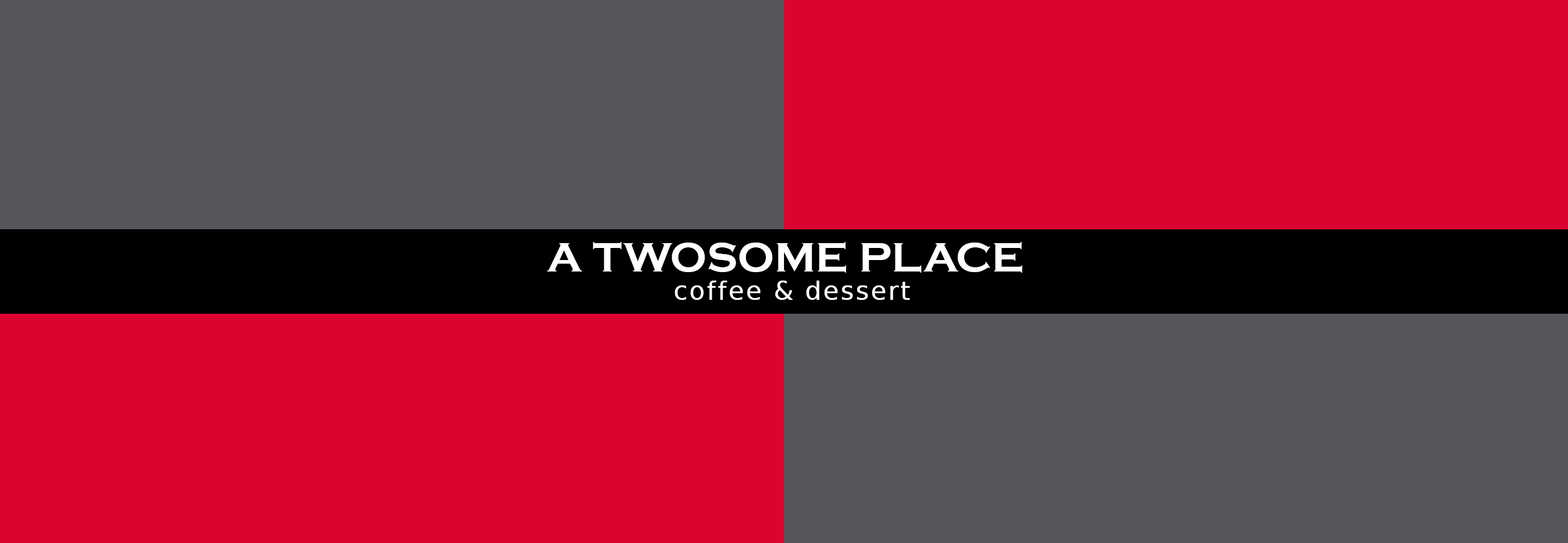
<style>
.page{position:relative;width:1568px;height:543px;background:#dd0330}
.page>*{position:absolute;margin:0}
.t1{font:42.7px "CopperplateGothic-Bold";color:#ffffff}
.t2{font:25.1px "DejaVuSans";letter-spacing:0.08em;color:#ffffff}
</style>
<div class="page">
<p class="t1" style="left:547px;top:242px;width:475px;height:31px">A TWOSOME PLACE</p>
<p class="t2" style="left:675px;top:280px;width:235px;height:20px">coffee &amp; dessert</p>
</div>
